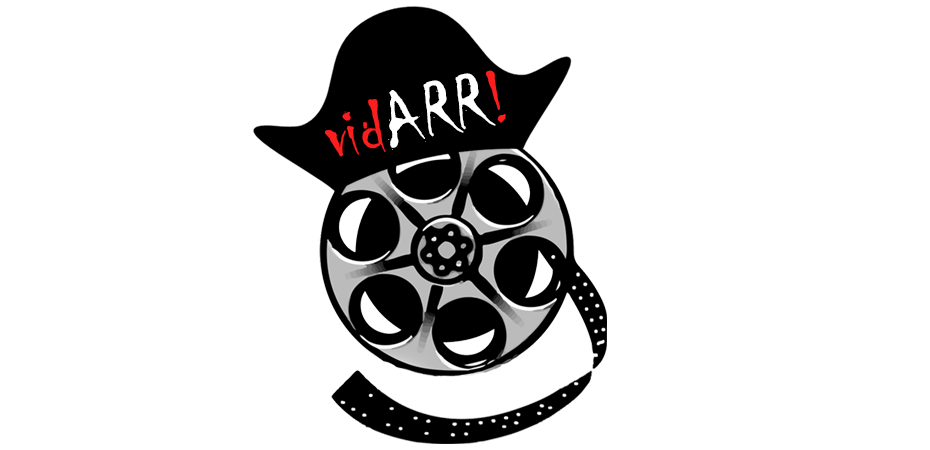
<style>
.page{position:relative;width:930px;height:450px;background:#ffffff}
.page>*{position:absolute;margin:0}
.t1{font:77.7px "Chiller-Regular";color:#f91f1f}
.t2{font:77.7px "Chiller-Regular";color:#ffffff}
</style>
<div class="page">
<p class="t1" style="left:325px;top:70px;width:181px;height:87px;rotate:-13deg">vid<span class="t2">ARR</span>!</p>
</div>
